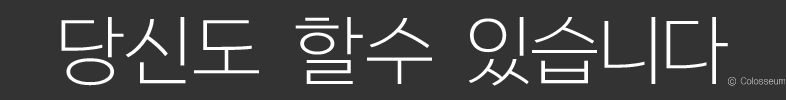
<style>
.page{position:relative;width:786px;height:100px;background:#333333}
.page>*{position:absolute;margin:0}
.t1{font:74px "KoreanNGD-L";color:#ffffff}
.t2{font:9px "KoreanNGD-L"}
</style>
<div class="page">
<p class="t1" style="left:61px;top:17px;width:667px;height:69px">당신도 할수 있습니다</p>
<p class="t2" style="left:728px;top:77px;width:57px;height:9px">ⓒ Colosseum</p>
</div>
